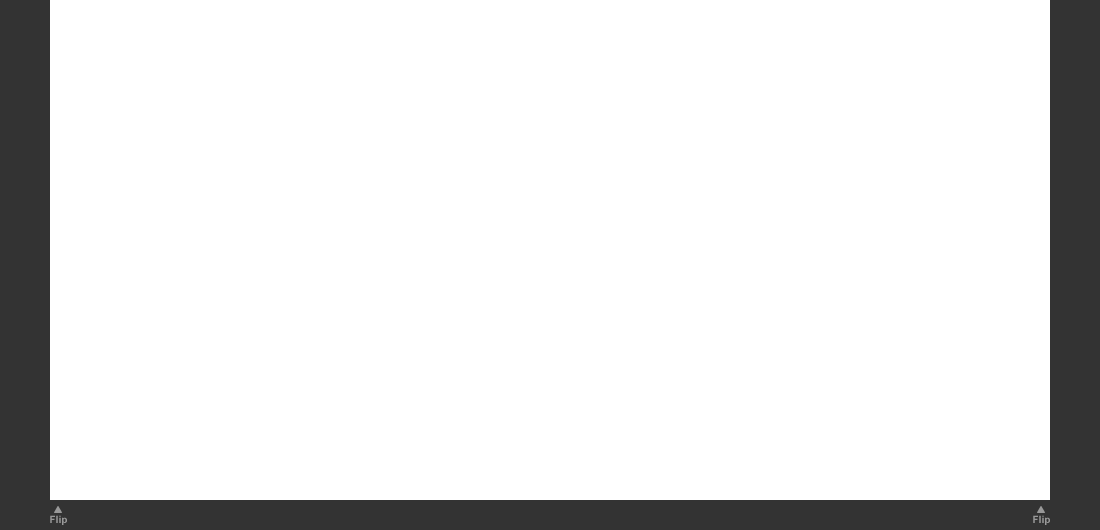
<style>
.page{position:relative;width:1100px;height:530px;background:#ffffff}
.page>*{position:absolute;margin:0}
.t1{font:10px "Arial-BoldMT";color:#999999}
</style>
<div class="page">
<p class="t1" style="left:50px;top:515px;width:17px;height:10px">Flip</p>
<p class="t1" style="left:1033px;top:515px;width:17px;height:10px">Flip</p>
</div>
